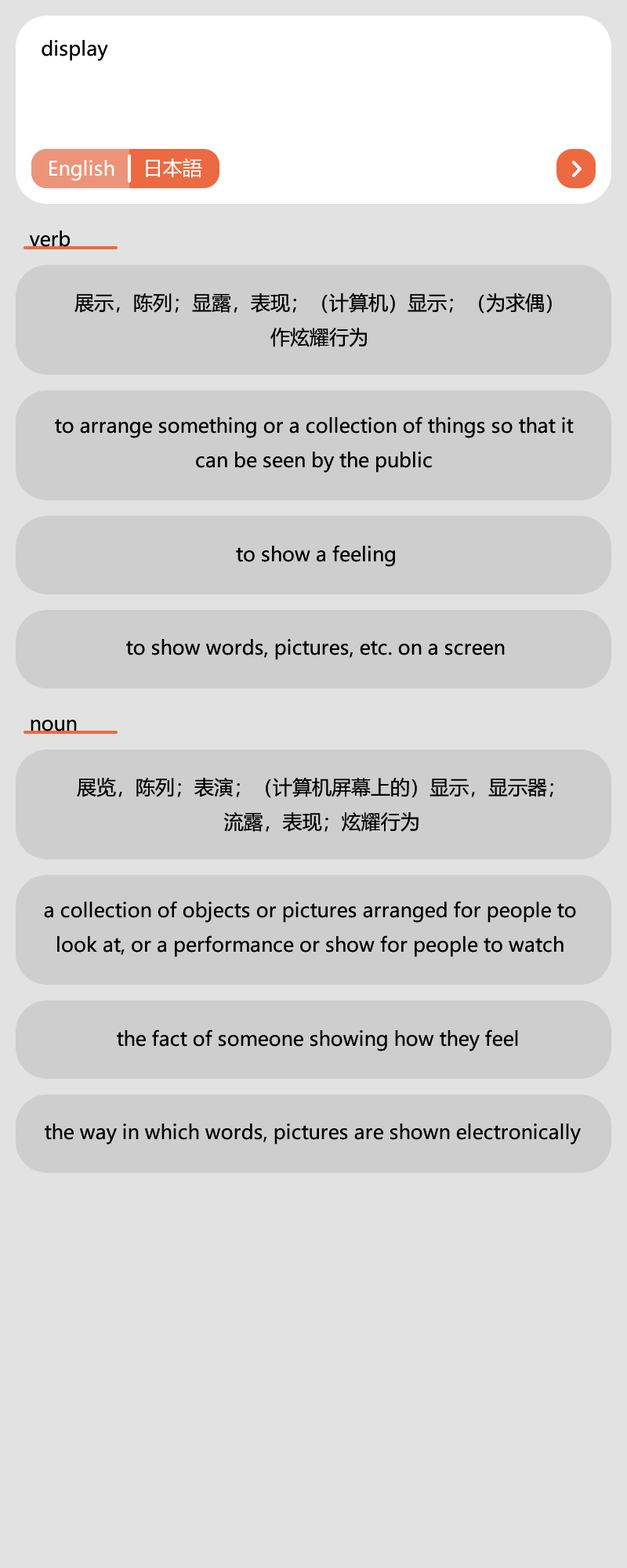
<style>
.page{position:relative;width:627px;height:1568px;background:#e2e2e2}
.page>*{position:absolute;margin:0}
.t1{font:19.6px "MicrosoftYaHei";color:#000000}
.t2{font:19.6px "MicrosoftYaHei";color:#ffffff}
.t3{font:19.6px "MicrosoftYaHei";color:#010101}
</style>
<div class="page">
<p class="t1" style="left:42px;top:40px;width:66px;height:21px">display</p>
<p class="t2" style="left:49px;top:160px;width:65px;height:21px">English</p>
<p class="t2" style="left:146px;top:158px;width:56px;height:20px">日本語</p>
<p class="t1" style="left:29px;top:230px;width:41px;height:17px">verb</p>
<p class="t3" style="left:74px;top:293px;width:478px;height:54px;text-align:center">展示，陈列；显露，表现；（计算机）显示；（为求偶）<br>作炫耀行为</p>
<p class="t3" style="left:55px;top:416px;width:519px;height:57px;text-align:center">to arrange something or a collection of things so that it<br>can be seen by the public</p>
<p class="t3" style="left:236px;top:545px;width:159px;height:22px">to show a feeling</p>
<p class="t3" style="left:126px;top:639px;width:379px;height:21px">to show words, pictures, etc. on a screen</p>
<p class="t1" style="left:31px;top:720px;width:46px;height:11px">noun</p>
<p class="t3" style="left:77px;top:778px;width:477px;height:54px;text-align:center">展览，陈列；表演；（计算机屏幕上的）显示，显示器；<br>流露，表现；炫耀行为</p>
<p class="t3" style="left:44px;top:901px;width:532px;height:56px;text-align:center">a collection of objects or pictures arranged for people to<br>look at, or a performance or show for people to watch</p>
<p class="t3" style="left:117px;top:1029px;width:401px;height:22px">the fact of someone showing how they feel</p>
<p class="t3" style="left:45px;top:1123px;width:536px;height:22px">the way in which words, pictures are shown electronically</p>
</div>
